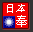
<style>
.page{position:relative;width:33px;height:32px;background:#f20000}
.page>*{position:absolute;margin:0}
.t1{font:10.4px "SimSun";color:#ffffff}
.t2{font:11.7px "SimSun";color:#ffffff}
</style>
<div class="page">
<p class="t1" style="left:7px;top:4px;width:18px;height:9px">日本</p>
<p class="t2" style="left:16px;top:15px;width:11px;height:12px">奉</p>
</div>
